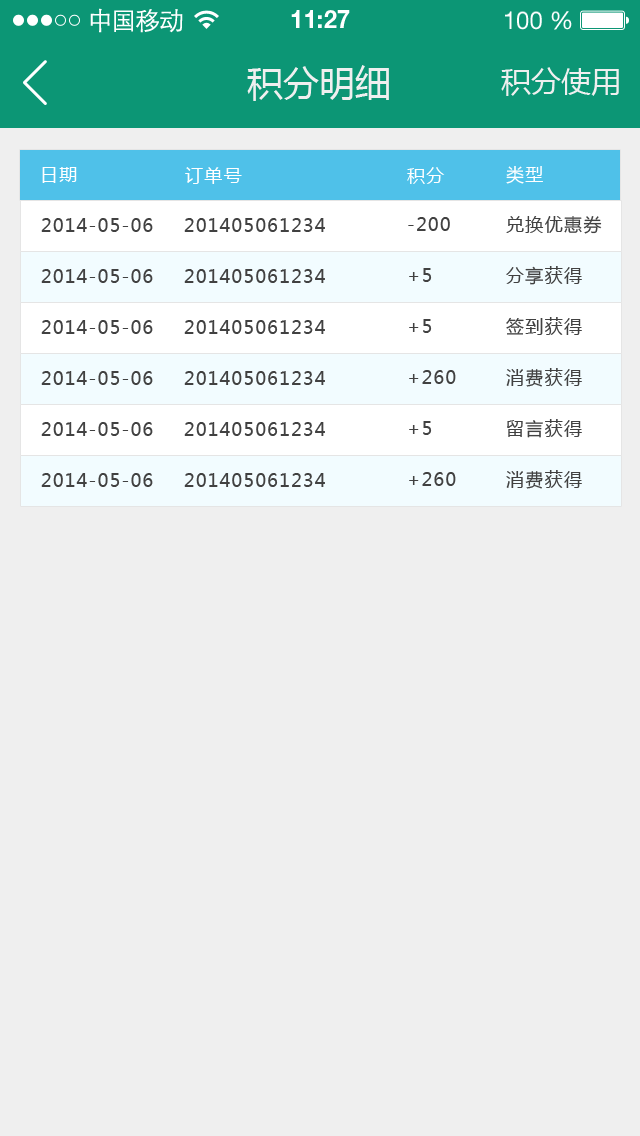
<style>
.page{position:relative;width:640px;height:1136px;background:#efefef}
.page>*{position:absolute;margin:0}
.t1{font:25px "STXihei";letter-spacing:-0.045em;color:#fefefe}
.t2{font:24.6px "HelveticaNeueLTPro-Bd";color:#ffffff}
.t3{font:24.6px "HelveticaNeueLTStd-Roman";color:#ffffff}
.t4{font:36px "MicrosoftYaHei";color:#efefef}
.t5{font:30px "MicrosoftYaHei";color:#efefef}
.t6{font:18px "MicrosoftYaHei";letter-spacing:0.075em;color:#ffffff}
.t7{font:18px "MicrosoftYaHei";letter-spacing:0.075em;color:#414141}
</style>
<div class="page">
<p class="t1" style="left:90px;top:8px;width:93px;height:25px">中国移动</p>
<p class="t2" style="left:291px;top:10px;width:59px;height:18px">11:27</p>
<p class="t3" style="left:505px;top:11px;width:67px;height:19px">100 %</p>
<p class="t4" style="left:247px;top:65px;width:142px;height:36px">积分明细</p>
<p class="t5" style="left:501px;top:67px;width:118px;height:29px">积分使用</p>
<p class="t6" style="left:42px;top:167px;width:35px;height:16px">日期</p>
<p class="t6" style="left:185px;top:167px;width:57px;height:17px">订单号</p>
<p class="t6" style="left:407px;top:167px;width:38px;height:17px">积分</p>
<p class="t6" style="left:506px;top:166px;width:37px;height:18px">类型</p>
<p class="t7" style="left:41px;top:218px;width:112px;height:14px">2014-05-06</p>
<p class="t7" style="left:184px;top:218px;width:141px;height:14px">201405061234</p>
<p class="t7" style="left:408px;top:217px;width:42px;height:14px">-200</p>
<p class="t7" style="left:506px;top:216px;width:96px;height:18px">兑换优惠券</p>
<p class="t7" style="left:41px;top:269px;width:112px;height:14px">2014-05-06</p>
<p class="t7" style="left:184px;top:269px;width:141px;height:14px">201405061234</p>
<p class="t7" style="left:409px;top:268px;width:23px;height:14px">+5</p>
<p class="t7" style="left:506px;top:266px;width:76px;height:19px">分享获得</p>
<p class="t7" style="left:506px;top:317px;width:76px;height:18px">签到获得</p>
<p class="t7" style="left:41px;top:320px;width:112px;height:14px">2014-05-06</p>
<p class="t7" style="left:184px;top:320px;width:141px;height:14px">201405061234</p>
<p class="t7" style="left:409px;top:319px;width:23px;height:14px">+5</p>
<p class="t7" style="left:41px;top:371px;width:112px;height:14px">2014-05-06</p>
<p class="t7" style="left:184px;top:371px;width:141px;height:14px">201405061234</p>
<p class="t7" style="left:409px;top:370px;width:47px;height:14px">+260</p>
<p class="t7" style="left:506px;top:368px;width:76px;height:19px">消费获得</p>
<p class="t7" style="left:41px;top:422px;width:112px;height:14px">2014-05-06</p>
<p class="t7" style="left:184px;top:422px;width:141px;height:14px">201405061234</p>
<p class="t7" style="left:409px;top:421px;width:23px;height:14px">+5</p>
<p class="t7" style="left:507px;top:419px;width:75px;height:19px">留言获得</p>
<p class="t7" style="left:41px;top:473px;width:112px;height:14px">2014-05-06</p>
<p class="t7" style="left:184px;top:473px;width:141px;height:14px">201405061234</p>
<p class="t7" style="left:409px;top:472px;width:47px;height:14px">+260</p>
<p class="t7" style="left:506px;top:470px;width:76px;height:19px">消费获得</p>
</div>
